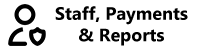
<style>
.page{position:relative;width:205px;height:50px;background:#ffffff}
.page>*{position:absolute;margin:0}
.t1{font:18px "MicrosoftTaiLe-Bold";color:#000000}
</style>
<div class="page">
<p class="t1" style="left:55px;top:6px;width:133px;height:40px;text-align:center">Staff, Payments<br>&amp; Reports</p>
</div>
